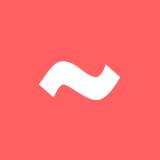
<style>
.page{position:relative;width:160px;height:160px;background:#ff6162}
.page>*{position:absolute;margin:0}
.t1{font:200px "LiGothicMed";color:#ffffff}
</style>
<div class="page">
<p class="t1" style="left:39px;top:61px;width:81px;height:39px">~</p>
</div>
